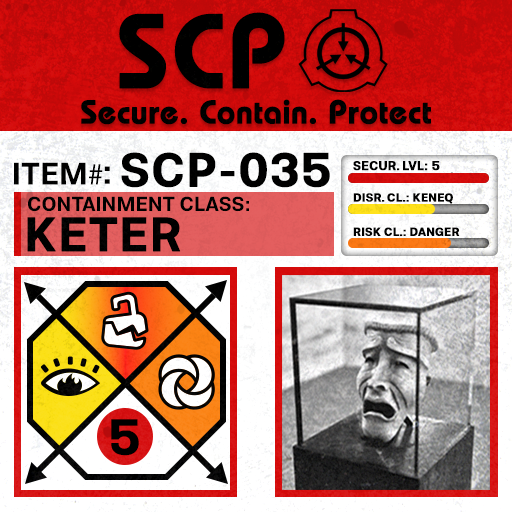
<style>
.page{position:relative;width:512px;height:512px}
.page>*{position:absolute;margin:0}
.t1{font:105.8px "BauhausLT-Demi";color:#000000;font-weight:bold}
.t2{font:33px "BauhausLT-Demi";color:#000000;font-weight:bold}
.t3{font:47.6px "Molde-Semibold";color:#000000;font-weight:bold}
.t4{font:12.5px "Molde-Semibold";color:#000000;font-weight:bold}
.t5{font:31.1px "Molde-Semibold";color:#000000}
.t6{font:31.1px "MyriadPro-Regular";color:#000000}
.t7{font:34.5px "Molde-Semibold";color:#000000}
.t8{font:20.3px "Molde-Semibold";color:#000000}
.t9{font:11.7px "Molde-Semibold";color:#000000;font-weight:bold}
.t10{font:47.8px "Molde-Semibold";color:#000000;font-weight:bold}
.t11{font:50px "Molde-Semibold";color:#000000;font-weight:bold}
</style>
<div class="page">
<p class="t1" style="left:119px;top:12px;width:166px;height:77px">SCP</p>
<p class="t2" style="left:81px;top:99px;width:350px;height:26px">Secure. Contain. Protect</p>
<p class="t3" style="left:121px;top:152px;width:209px;height:36px">SCP-035</p>
<p class="t4" style="left:353px;top:161px;width:87px;height:10px">SECUR. LVL: 5</p>
<p class="t5" style="left:14px;top:162px;width:89px;height:23px">ITEM<span class="t6">#</span></p>
<p class="t7" style="left:104px;top:166px;width:6px;height:18px">:</p>
<p class="t8" style="left:28px;top:196px;width:221px;height:16px">CONTAINMENT CLASS:</p>
<p class="t9" style="left:353px;top:193px;width:100px;height:11px">DISR. CL.: KENEQ</p>
<p class="t10" style="left:27px;top:217px;width:154px;height:35px">KETER</p>
<p class="t9" style="left:353px;top:227px;width:107px;height:9px">RISK CL.: DANGER</p>
<p class="t11" style="left:111px;top:419px;width:28px;height:37px">5</p>
</div>
